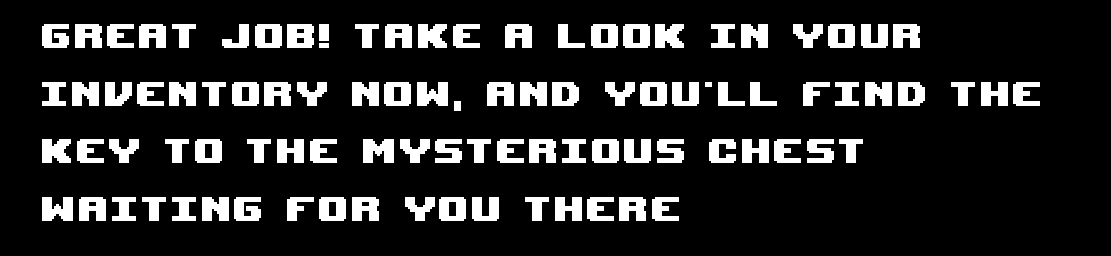
<style>
.page{position:relative;width:1111px;height:256px;background:#000000}
.page>*{position:absolute;margin:0}
.t1{font:48px "UpheavalTT-BRK-";letter-spacing:0.075em;color:#ffffff}
</style>
<div class="page">
<p class="t1" style="left:42px;top:24px;width:998px;height:197px">Great job! Take a look in your <br>inventory now, and you'll find the <br>key to the mysterious chest <br>waiting for you there</p>
</div>
